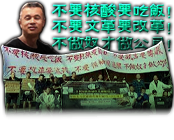
<style>
.page{position:relative;width:174px;height:140px}
.page>*{position:absolute;margin:0}
.t1{font:17.6px/16.3px "FZZJ-MSHLFW";letter-spacing:-0.075em}
</style>
<div class="page">
<p class="t1" style="left:52px;top:3px;width:119px;height:49px">不要核酸要吃饭！<br>不要文革要改革！<br>不做奴才做公民！</p>
</div>
